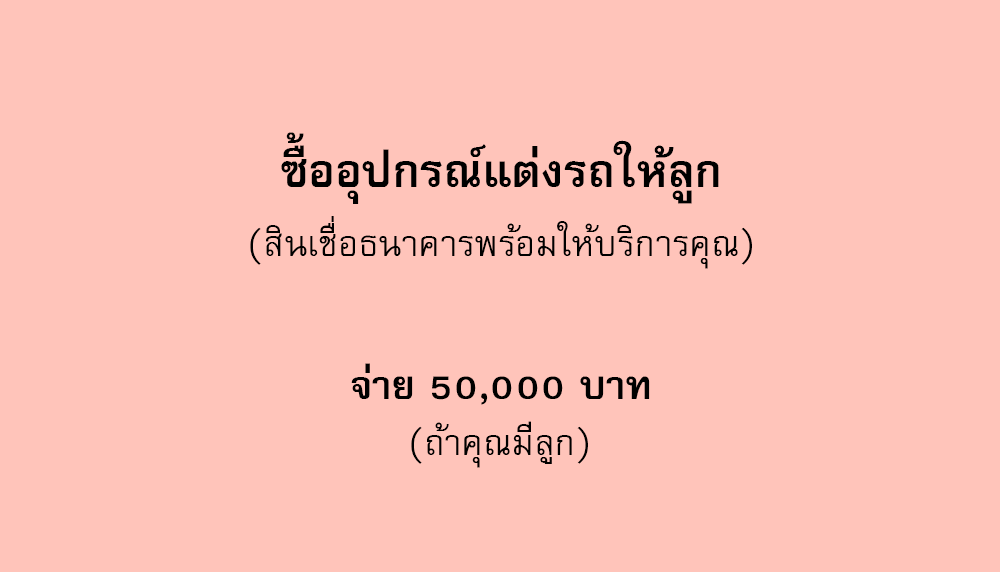
<style>
.page{position:relative;width:1000px;height:572px;background:#ffc4ba}
.page>*{position:absolute;margin:0}
.t1{font:64px "FreesiaUPCBold";color:#000000}
.t2{font:50px "FreesiaUPC";color:#000000}
.t3{font:56px "FreesiaUPCBold";color:#000000}
</style>
<div class="page">
<p class="t1" style="left:281px;top:132px;width:438px;height:72px">ซื้ออุปกรณ์แต่งรถให้ลูก</p>
<p class="t2" style="left:250px;top:216px;width:502px;height:53px">(สินเชื่อธนาคารพร้อมให้บริการคุณ)</p>
<p class="t3" style="left:351px;top:363px;width:299px;height:42px">จ่าย 50,000 บาท</p>
<p class="t2" style="left:411px;top:421px;width:177px;height:47px">(ถ้าคุณมีลูก)</p>
</div>
